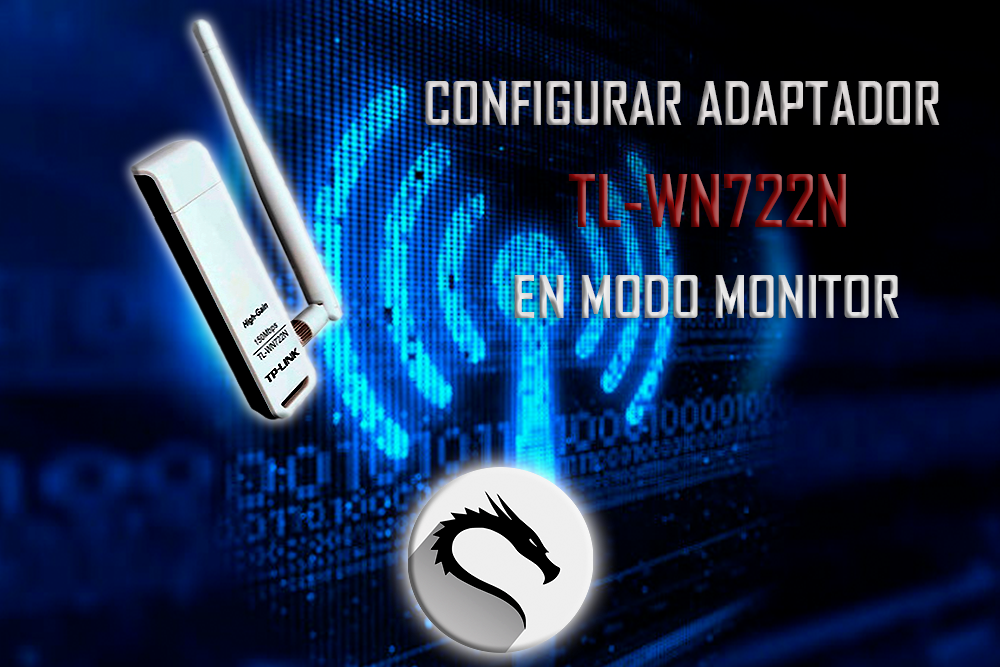
<style>
.page{position:relative;width:1000px;height:667px}
.page>*{position:absolute;margin:0}
.t1{font:57.7px "AgencyFB-Bold";scale:1.04 1}
.t2{font:68.8px "AgencyFB-Bold";scale:1.03 1}
.t3{font:55.8px "AgencyFB-Bold";scale:1.1 1}
</style>
<div class="page">
<p class="t1" style="left:425px;top:81px;width:515px;height:44px">CONFIGURAR ADAPTADOR</p>
<p class="t2" style="left:568px;top:174px;width:278px;height:53px">TL-WN722N</p>
<p class="t3" style="left:514px;top:275px;width:385px;height:43px">EN MODO MONITOR</p>
</div>
